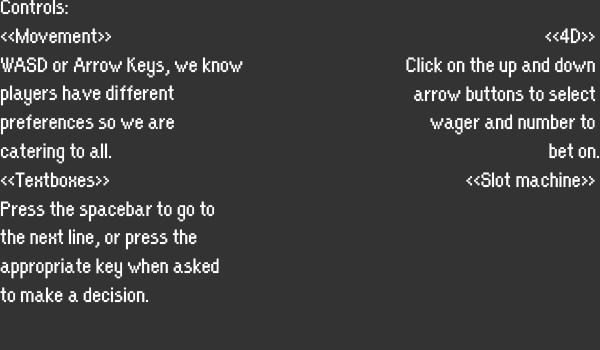
<style>
.page{position:relative;width:600px;height:350px;background:#333333}
.page>*{position:absolute;margin:0}
.t1{font:24px "OrangeKid-Regular";color:#ffffff}
</style>
<div class="page">
<p class="t1" style="left:0px;top:0px;width:243px;height:303px">Controls: <br>&lt;&lt;Movement&gt;&gt;<br>WASD or Arrow Keys, we know <br>players have different <br>preferences so we are <br>catering to all.<br>&lt;&lt;Textboxes&gt;&gt;<br>Press the spacebar to go to <br>the next line, or press the <br>appropriate key when asked <br>to make a decision.</p>
<p class="t1" style="left:406px;top:28px;width:194px;height:160px;text-align:right">&lt;&lt;4D&gt;&gt; <br>Click on the up and down <br>arrow buttons to select <br>wager and number to <br>bet on.<br>&lt;&lt;Slot machine&gt;&gt;</p>
</div>
